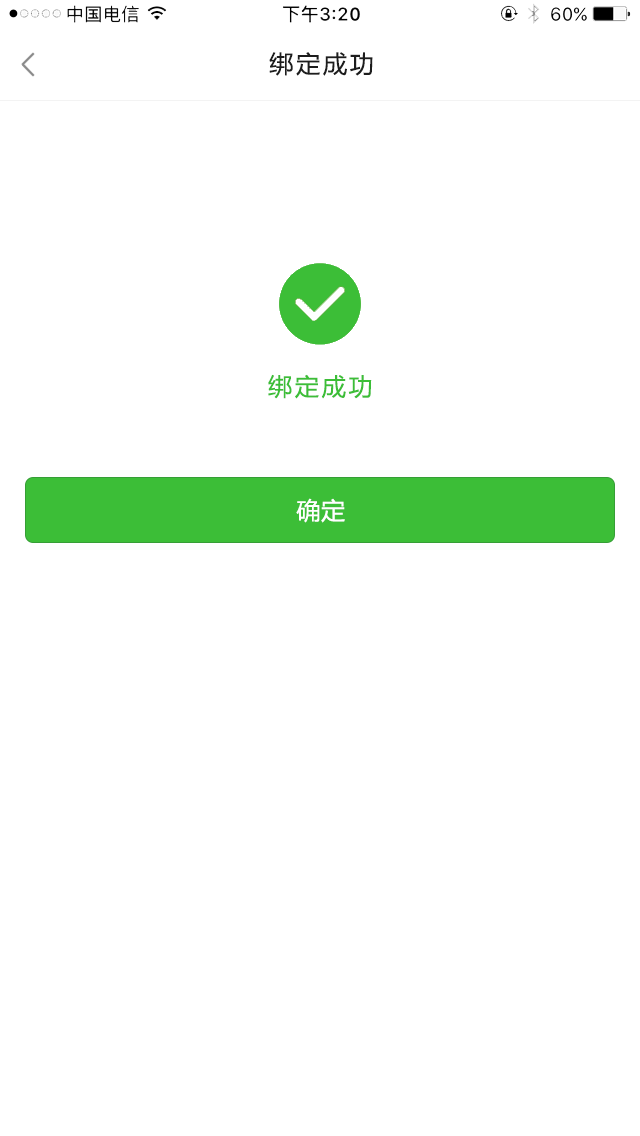
<style>
.page{position:relative;width:640px;height:1136px;background:#ffffff}
.page>*{position:absolute;margin:0}
.t1{font:24px "MicrosoftYaHei";letter-spacing:0.12em;color:#1d1d1d;font-variant:small-caps}
.t2{font:24px "MicrosoftYaHei";letter-spacing:0.12em;color:#3cbe37;font-variant:small-caps}
.t3{font:24px "MicrosoftYaHei";letter-spacing:0.025em;color:#ffffff;font-variant:small-caps}
</style>
<div class="page">
<p class="t1" style="left:269px;top:52px;width:104px;height:24px">绑定成功</p>
<p class="t2" style="left:268px;top:374px;width:104px;height:25px">绑定成功</p>
<p class="t3" style="left:296px;top:498px;width:49px;height:25px">确定</p>
</div>
